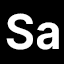
<style>
.page{position:relative;width:64px;height:64px;background:#000000}
.page>*{position:absolute;margin:0}
.t1{font:48px "InterUI-Bold";color:#ffffff}
</style>
<div class="page">
<p class="t1" style="left:6px;top:13px;width:53px;height:37px">Sa</p>
</div>
